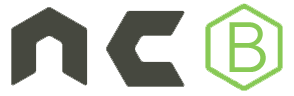
<style>
.page{position:relative;width:294px;height:96px;background:#ffffff}
.page>*{position:absolute;margin:0}
.t1{font:72px "BanglaSangamMN";color:#88c955}
</style>
<div class="page">
<p class="t1" style="left:229px;top:22px;width:37px;height:50px">B</p>
</div>
